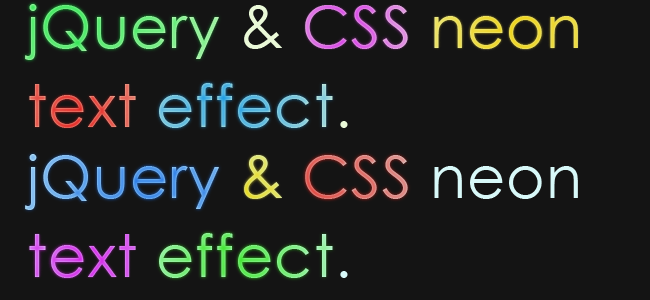
<style>
.page{position:relative;width:650px;height:300px;background:#141414}
.page>*{position:absolute;margin:0}
.t1{font:59px/79px "CenturyGothic";letter-spacing:0.02em}
</style>
<div class="page">
<p class="t1" style="left:25px;top:4px;width:553px;height:124px">jQuery &amp; CSS neon text effect.</p>
<p class="t1" style="left:25px;top:154px;width:553px;height:124px">jQuery &amp; CSS neon text effect.</p>
</div>
